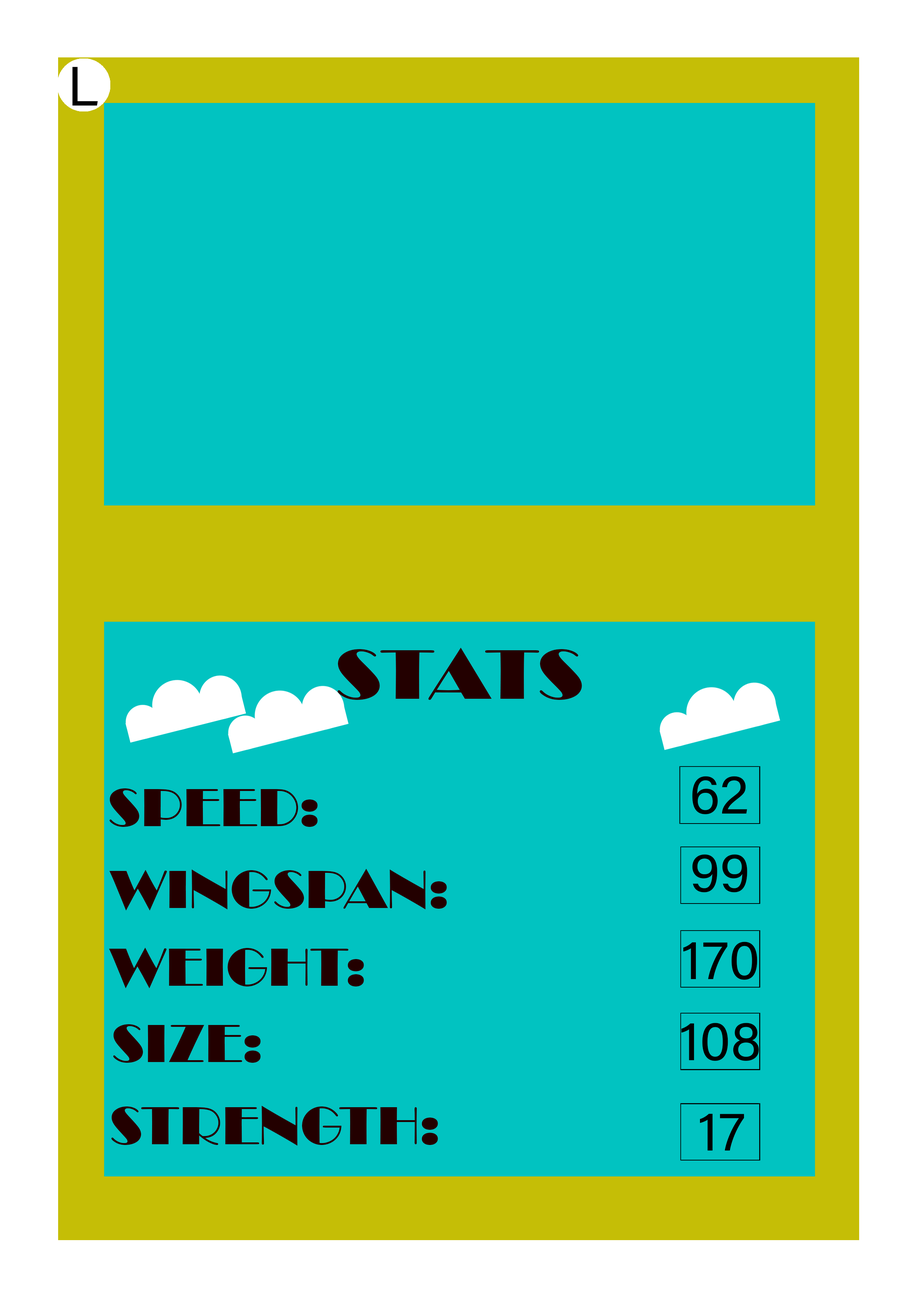
<style>
.page{position:relative;width:918px;height:1299px;background:#01c3c1}
.page>*{position:absolute;margin:0}
.t1{font:55.5px "AcuminConcept-Regular";color:#000000}
.t2{font:72.4px "Broadway";color:#230000;scale:1.09 1}
.t3{font:55.5px "Broadway";color:#230000}
</style>
<div class="page">
<p class="t1" style="left:72px;top:67px;width:26px;height:39px">L</p>
<p class="t2" style="left:338px;top:648px;width:244px;height:52px">STATS</p>
<p class="t1" style="left:692px;top:776px;width:55px;height:38px">62</p>
<p class="t3" style="left:110px;top:788px;width:208px;height:39px">SPEED:</p>
<p class="t1" style="left:692px;top:854px;width:55px;height:38px">99</p>
<p class="t3" style="left:109px;top:869px;width:338px;height:41px">WINGSPAN:</p>
<p class="t1" style="left:683px;top:941px;width:74px;height:39px">170</p>
<p class="t3" style="left:109px;top:947px;width:255px;height:41px">WEIGHT:</p>
<p class="t3" style="left:113px;top:1024px;width:148px;height:39px">SIZE:</p>
<p class="t1" style="left:682px;top:1023px;width:77px;height:38px">108</p>
<p class="t3" style="left:111px;top:1105px;width:327px;height:40px">STRENGTH:</p>
<p class="t1" style="left:700px;top:1113px;width:44px;height:37px">17</p>
</div>
